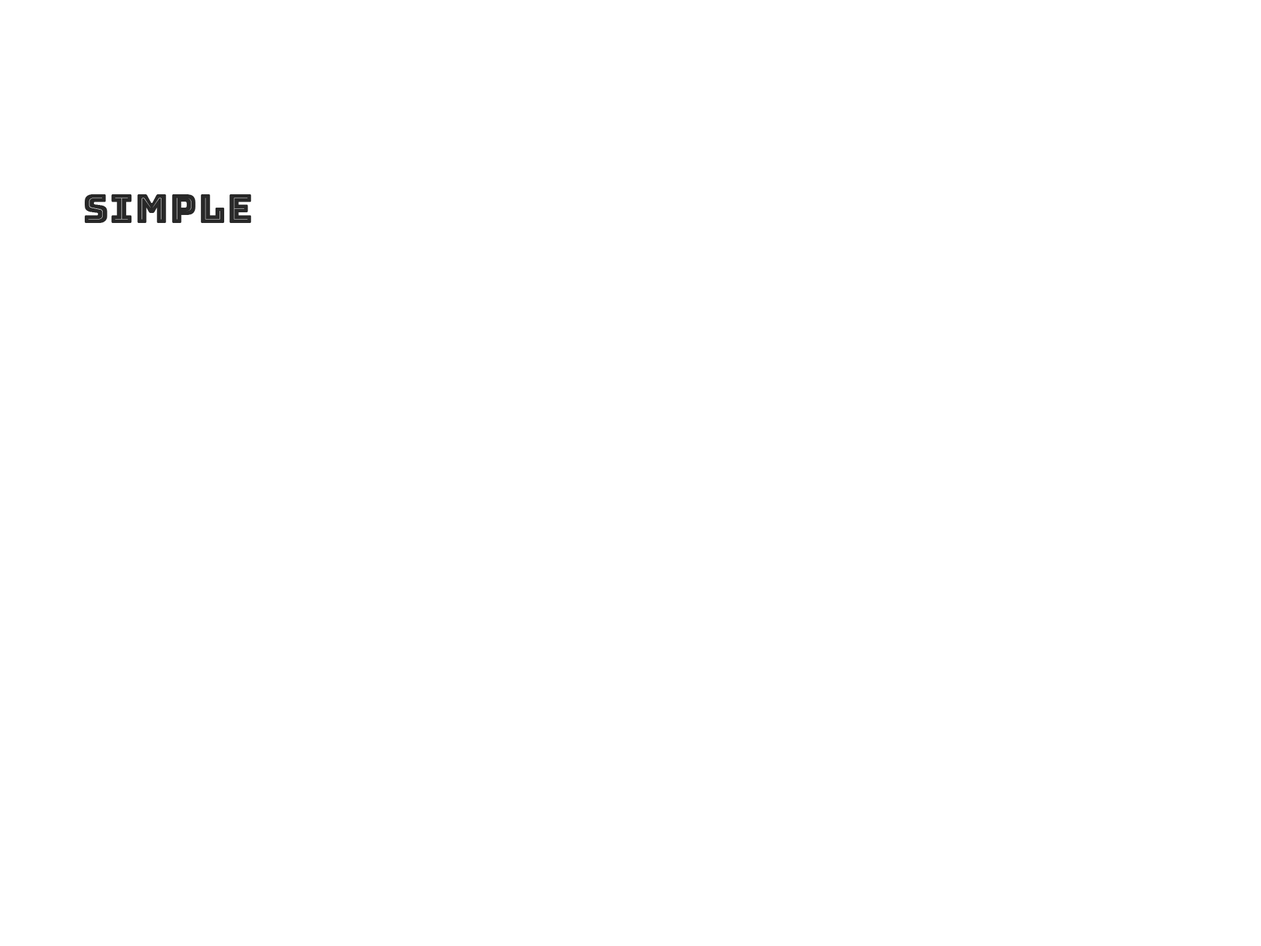
<style>
.page{position:relative;width:1261px;height:946px;background:#ffffff}
.page>*{position:absolute;margin:0}
.t1{font:40px "BungeeInline-Regular";letter-spacing:0.025em;color:#282828;text-transform:uppercase}
</style>
<div class="page">
<p class="t1" style="left:85px;top:194px;width:167px;height:29px">SIMPLE</p>
</div>
